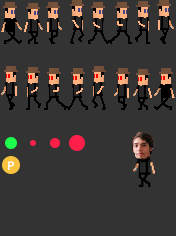
<style>
.page{position:relative;width:176px;height:236px;background:#333333}
.page>*{position:absolute;margin:0}
.t1{font:12px "AvenirNext-DemiBold";color:#ffffff}
</style>
<div class="page">
<p class="t1" style="left:8px;top:161px;width:6px;height:9px">P</p>
</div>
